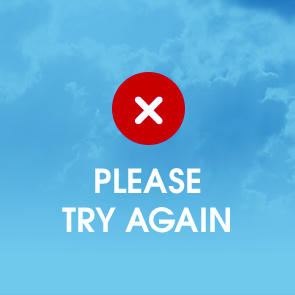
<style>
.page{position:relative;width:295px;height:295px}
.page>*{position:absolute;margin:0}
.t1{font:33px "TeXGyreAdventor-Bold";color:#ffffff;text-transform:uppercase}
</style>
<div class="page">
<p class="t1" style="left:62px;top:168px;width:168px;height:65px;text-align:center">Please<br>try again</p>
</div>
